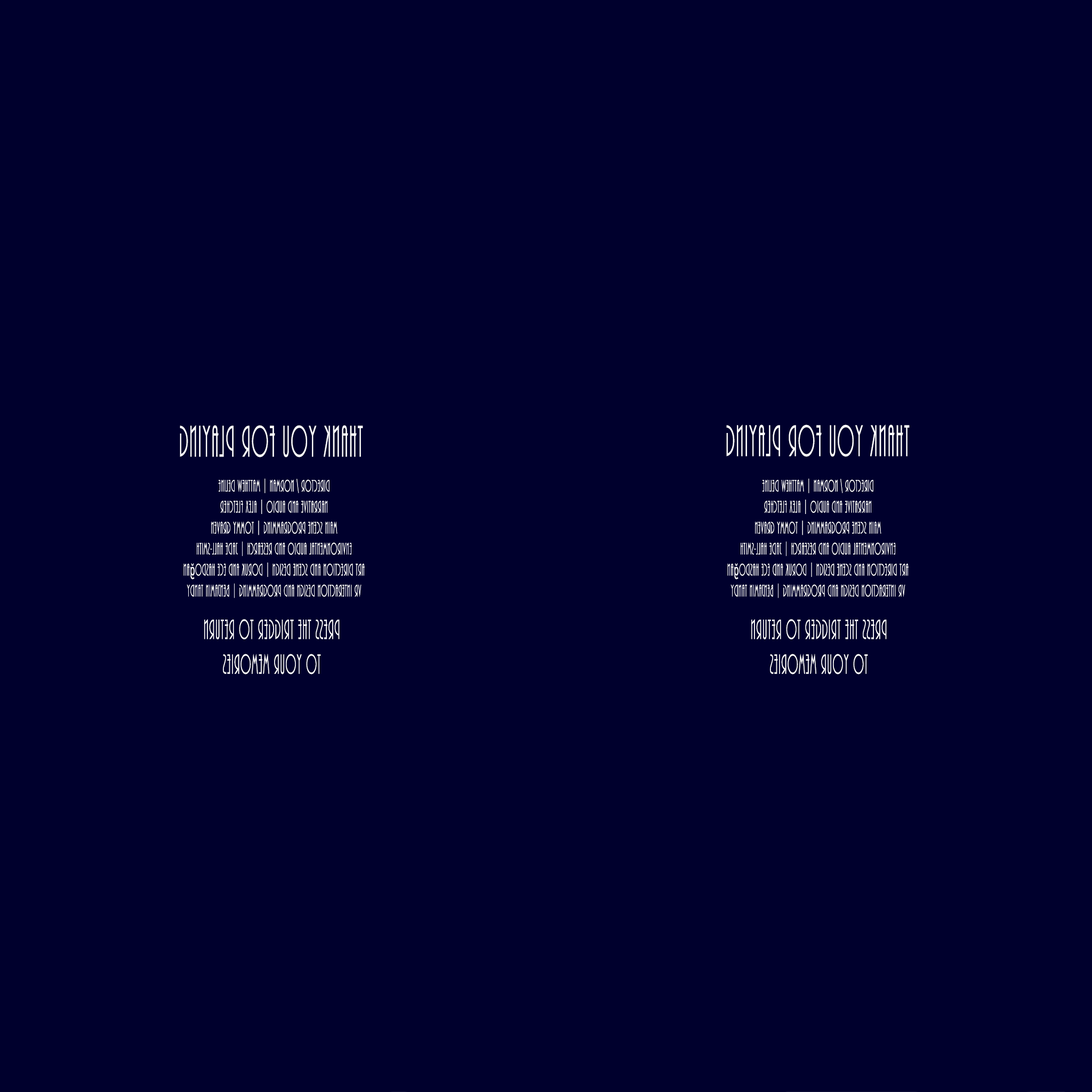
<style>
.page{position:relative;width:1092px;height:1092px;background:#00002d}
.page>*{position:absolute;margin:0}
.t1{font:46.1px "ARBONNIE";letter-spacing:0.05em;color:#ffffff;scale:0.5 1}
.t2{font:17.5px "ARBONNIE";letter-spacing:0.05em;color:#ffffff;scale:0.5 1}
.t3{font:17.5px "MyriadPro-Regular";letter-spacing:0.05em;color:#ffffff;scale:0.5 1}
.t4{font:29px "ARBONNIE";letter-spacing:0.05em;color:#ffffff;scale:0.5 1}
</style>
<div class="page">
<p class="t1" style="left:180px;top:425px;width:183px;height:32px;rotate:180deg">THANK YOU FOR PLAYING</p>
<p class="t1" style="left:726px;top:424px;width:184px;height:33px;rotate:180deg">THANK YOU FOR PLAYING</p>
<p class="t2" style="left:183px;top:478px;width:182px;height:120px;text-align:center;rotate:180deg">Director / Norman | Matthew Deline<br>Narrative and Audio | Alex Fletcher<br>Main Scene Programming | Tommy Graven<br>Environmental Audio and Research | Jade Hall-Smith<br>Art Direction and Scene Design | Doruk and Ece Hasdo<span class="t3">ğ</span>an<br>VR Interaction Design and Programming | Benjamin Tandy</p>
<p class="t2" style="left:727px;top:478px;width:182px;height:120px;text-align:center;rotate:180deg">Director / Norman | Matthew Deline<br>Narrative and Audio | Alex Fletcher<br>Main Scene Programming | Tommy Graven<br>Environmental Audio and Research | Jade Hall-Smith<br>Art Direction and Scene Design | Doruk and Ece Hasdo<span class="t3">ğ</span>an<br>VR Interaction Design and Programming | Benjamin Tandy</p>
<p class="t4" style="left:204px;top:619px;width:136px;height:55px;text-align:center;rotate:180deg">PRESS THE TRIGGER TO RETURN<br>TO YOUR MEMORIES</p>
<p class="t4" style="left:751px;top:619px;width:136px;height:55px;text-align:center;rotate:180deg">PRESS THE TRIGGER TO RETURN<br>TO YOUR MEMORIES</p>
</div>
